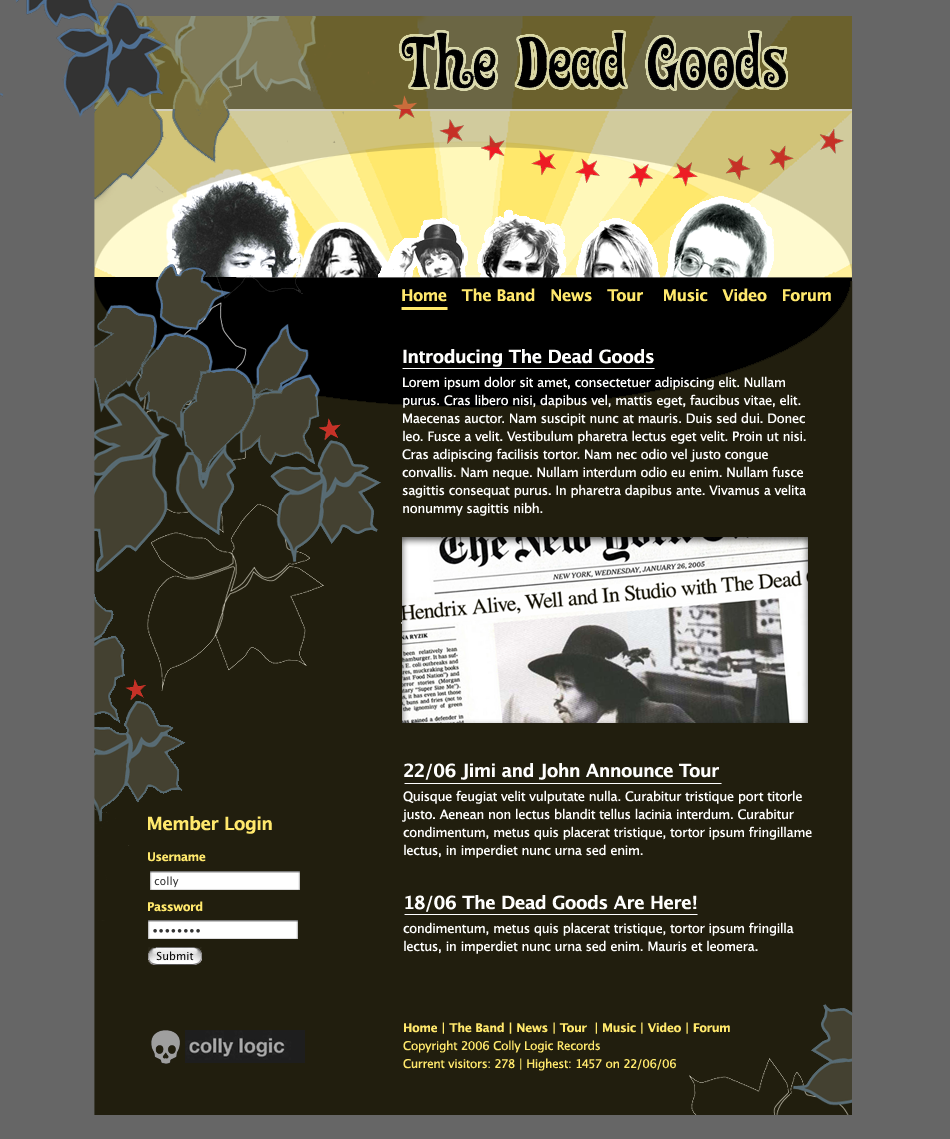
<style>
.page{position:relative;width:950px;height:1139px;background:#211e0e}
.page>*{position:absolute;margin:0}
.t1{font:16px "LucidaGrande-Bold";letter-spacing:-0.02em;color:#ffe86c}
.t2{font:13px/18px "LucidaGrande";letter-spacing:-0.02em;color:#fefefd}
.t3{font:18px/18px "LucidaGrande-Bold";letter-spacing:-0.02em;color:#fefefd}
.t4{font:12px/18px "LucidaGrande";letter-spacing:-0.02em;color:#ffe86c}
.t5{font:12px/14px "LucidaGrande-Bold";letter-spacing:-0.02em;color:#ffe86c}
</style>
<div class="page">
<p class="t1" style="left:402px;top:288px;width:429px;height:14px">Home   The Band   News   Tour    Music   Video   Forum</p>
<p class="t2" style="left:401px;top:349px;width:405px;height:327px"><span class="t3">Introducing The Dead Goods<br><br></span>Lorem ipsum dolor sit amet, consectetuer adipiscing elit. Nullam <br>purus. Cras libero nisi, dapibus vel, mattis eget, faucibus vitae, elit. <br>Maecenas auctor. Nam suscipit nunc at mauris. Duis sed dui. Donec <br>leo. Fusce a velit. Vestibulum pharetra lectus eget velit. Proin ut nisi. <br>Cras adipiscing facilisis tortor. Nam nec odio vel justo congue <br>convallis. Nam neque. Nullam interdum odio eu enim. Nullam fusce <br>sagittis consequat purus. In pharetra dapibus ante. Vivamus a velita <br>nonummy sagittis nibh.<br><br>Aliquam malesuada. Quisque consequat, leo quis ultrices ultrices,<br>enim orci tempus nisl, et hendrerit sapien dui vitae diam. Nulla id <br>elit nec nisi scelerisque iaculis. Ut dignissim rhoncus tellus. <br>Quisque feugiat velit vulputate nulla. Curabitur tristique porttitor <br>justo. Aenean non lectus blandit tellus lacinia interdum. Curabitur <br>condimentum, metus quis placerat tristique, tortor ipsum fringilla <br>lectus, in imperdiet nunc urna sed enim. Mauris et leo. Vivamus <br>cursus nisi consectetuer odio.</p>
<p class="t2" style="left:402px;top:763px;width:410px;height:191px"><span class="t3">22/06 Jimi and John Announce Tour<br> <br></span>Quisque feugiat velit vulputate nulla. Curabitur tristique port titorle<br>justo. Aenean non lectus blandit tellus lacinia interdum. Curabitur <br>condimentum, metus quis placerat tristique, tortor ipsum fringillame <br>lectus, in imperdiet nunc urna sed enim.<br><br><br><span class="t3">18/06 The Dead Goods Are Here!<br><br></span>condimentum, metus quis placerat tristique, tortor ipsum fringilla <br>lectus, in imperdiet nunc urna sed enim. Mauris et leomera.</p>
<p class="t4" style="left:403px;top:1022px;width:327px;height:49px"><span class="t5">Home | The Band | News | Tour  | Music | Video | Forum<br></span>Copyright 2006 Colly Logic Records<br>Current visitors: 278 | Highest: 1457 on 22/06/06</p>
</div>
